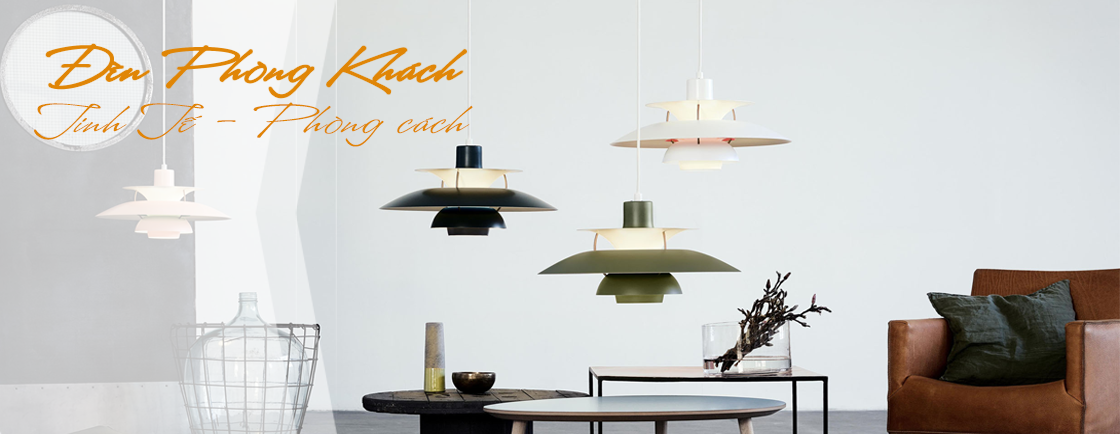
<style>
.page{position:relative;width:1120px;height:434px}
.page>*{position:absolute;margin:0}
.t1{font:50px "UTM-A&S-Heartbeat";letter-spacing:0.028em;color:#e08505;scale:1.5 1}
.t2{font:43px "UTM-A&S-Heartbeat";letter-spacing:0.028em;color:#e08505;scale:1.5 1}
</style>
<div class="page">
<p class="t1" style="left:46px;top:44px;width:421px;height:54px">Đèn Phòng Khách</p>
<p class="t2" style="left:34px;top:102px;width:439px;height:45px">Tinh Tế - Phòng cách</p>
</div>
